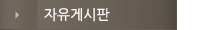
<style>
.page{position:relative;width:207px;height:30px}
.page>*{position:absolute;margin:0}
.t1{font:14px "NanumGothic";color:#ffffff}
</style>
<div class="page">
<p class="t1" style="left:44px;top:8px;width:66px;height:14px">자유게시판</p>
</div>
